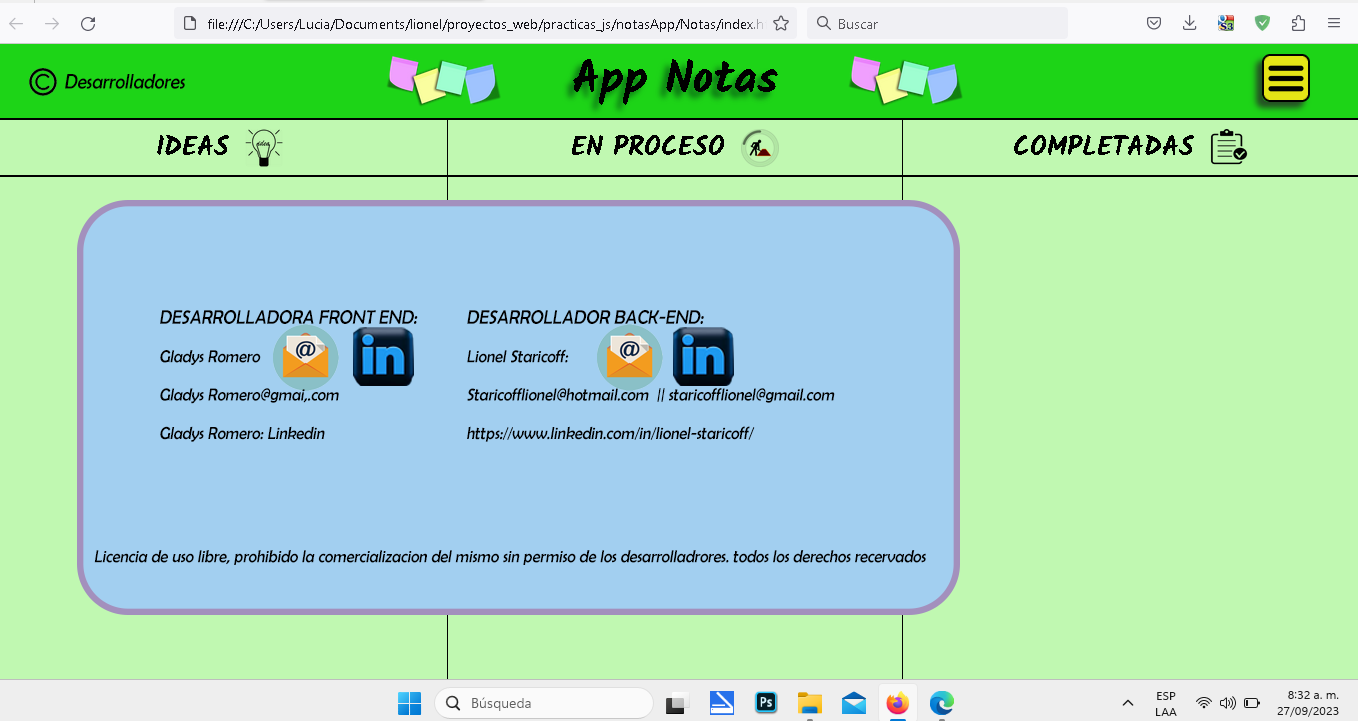
<style>
.page{position:relative;width:1358px;height:721px;background:#c0f8b1}
.page>*{position:absolute;margin:0}
.t1{font:20.9px "BerlinSansFB-Reg";color:#000000;font-style:italic;scale:0.91 1}
.t2{font:17.6px "BerlinSansFB-Reg";color:#000000;font-style:italic;scale:0.91 1}
.t3{font:19.8px "BerlinSansFB-Reg";color:#000000;text-transform:uppercase;font-style:italic;scale:0.91 1}
</style>
<div class="page">
<p class="t1" style="left:65px;top:73px;width:120px;height:16px">Desarrolladores</p>
<p class="t2" style="left:160px;top:310px;width:258px;height:132px"><span class="t3">Desarrolladora Front End:<br></span><br>Gladys Romero<br><br>Gladys Romero@gmai,.com<br><br>Gladys Romero: Linkedin</p>
<p class="t2" style="left:467px;top:310px;width:368px;height:132px"><span class="t3">Desarrollador Back-End:<br></span><br>Lionel Staricoff:<br><br>Staricofflionel@hotmail.com  || staricofflionel@gmail.com<br><br>https://www.linkedin.com/in/lionel-staricoff/</p>
<p class="t2" style="left:94px;top:550px;width:832px;height:15px">Licencia de uso libre, prohibido la comercializacion del mismo sin permiso de los desarrolladrores. todos los derechos recervados</p>
</div>
